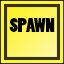
<style>
.page{position:relative;width:64px;height:64px}
.page>*{position:absolute;margin:0}
.t1{font:18.8px "PoplarStd";color:#000000}
</style>
<div class="page">
<p class="t1" style="left:9px;top:18px;width:46px;height:14px">SPAWN</p>
</div>
